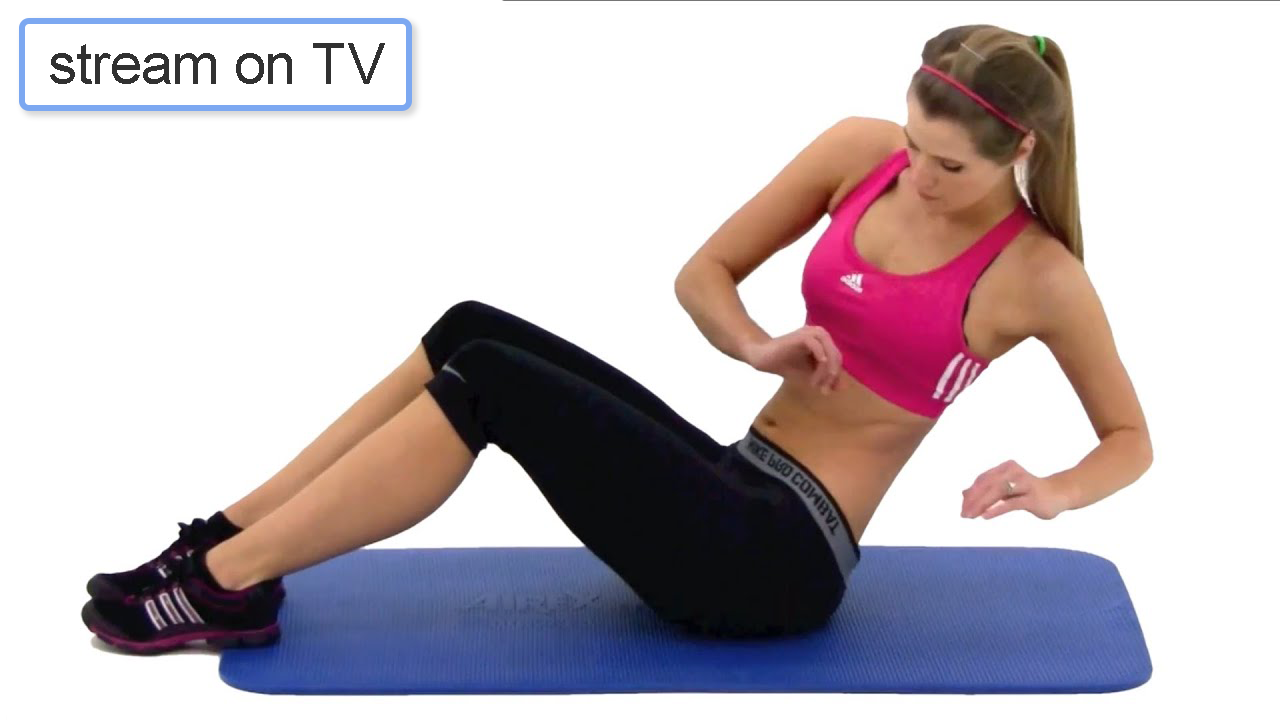
<style>
.page{position:relative;width:1280px;height:720px;background:#ffffff}
.page>*{position:absolute;margin:0}
.t1{font:57px "ArialMT";color:#313131}
</style>
<div class="page">
<p class="t1" style="left:50px;top:43px;width:335px;height:41px">stream on TV</p>
</div>
